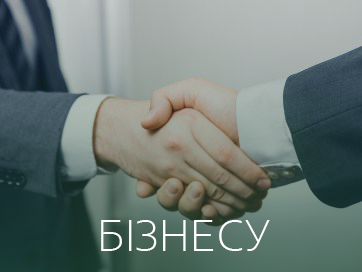
<style>
.page{position:relative;width:362px;height:272px}
.page>*{position:absolute;margin:0}
.t1{font:48px "CorbelLight";color:#ffffff}
</style>
<div class="page">
<p class="t1" style="left:101px;top:220px;width:169px;height:31px">БІЗНЕСУ</p>
</div>
